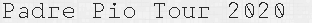
<style>
.page{position:relative;width:312px;height:23px;background:#eeeeee}
.page>*{position:absolute;margin:0}
.t1{font:25px "Slurpette-Regular";color:#292929}
</style>
<div class="page">
<p class="t1" style="left:3px;top:2px;width:281px;height:16px">Padre Pio Tour 2020</p>
</div>
